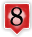
<style>
.page{position:relative;width:32px;height:37px}
.page>*{position:absolute;margin:0}
.t1{font:26px "Century";color:#040404}
</style>
<div class="page">
<p class="t1" style="left:10px;top:7px;width:13px;height:19px">8</p>
</div>
